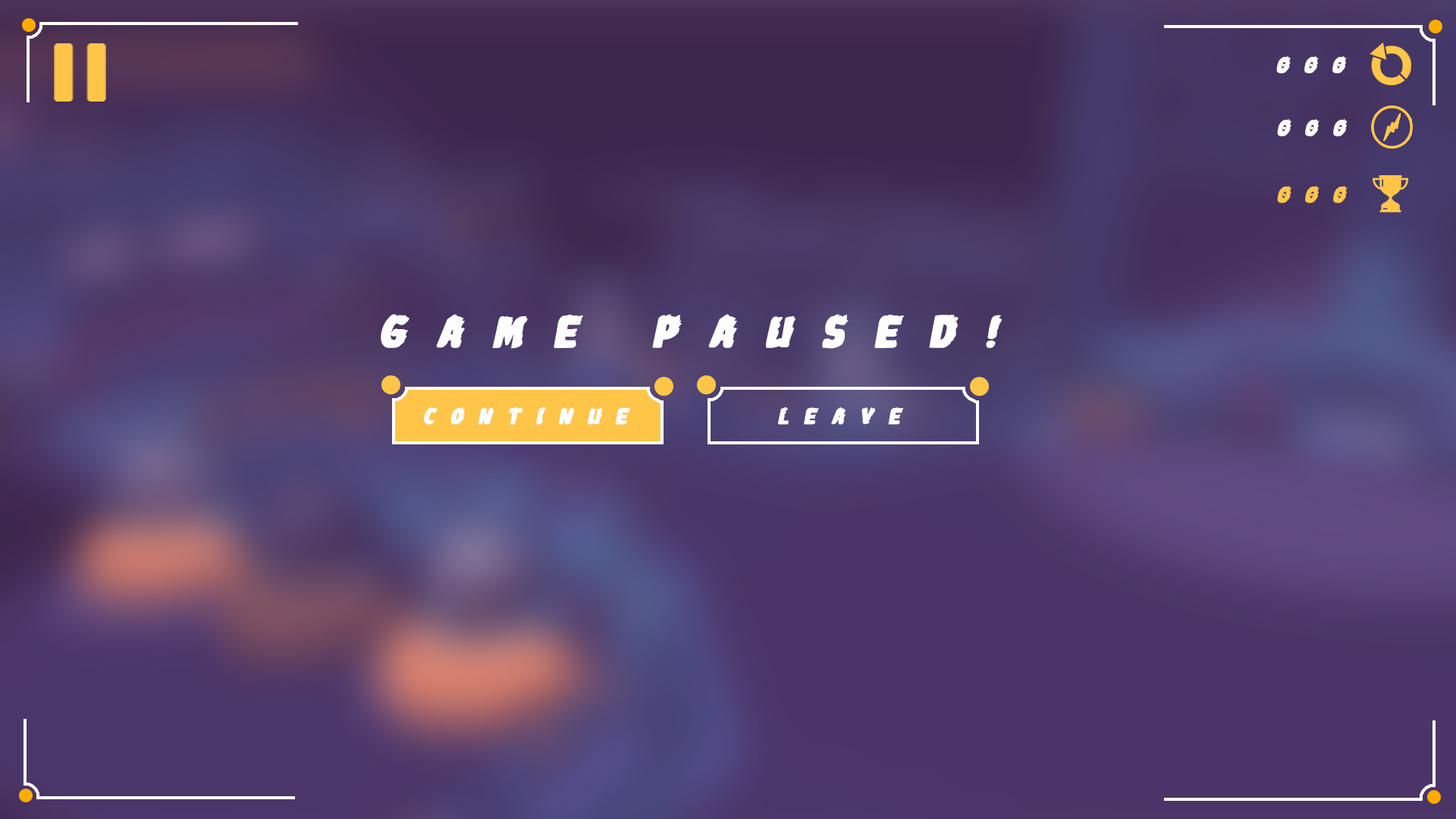
<style>
.page{position:relative;width:1456px;height:819px}
.page>*{position:absolute;margin:0}
.t1{font:22.7px "JohnnyTorch";letter-spacing:0.67em;color:#ffffff;font-weight:bold;font-style:italic}
.t2{font:22.7px "JohnnyTorch";letter-spacing:0.67em;color:#ffc549;font-weight:bold;font-style:italic}
.t3{font:45.5px "JohnnyTorch";letter-spacing:0.67em;color:#fdfdfe;font-weight:bold;font-style:italic}
.t4{font:22.7px "JohnnyTorch";letter-spacing:0.67em;color:#fdfdfe;font-weight:bold;font-style:italic}
</style>
<div class="page">
<p class="t1" style="left:1276px;top:56px;width:71px;height:18px">000</p>
<p class="t1" style="left:1277px;top:119px;width:71px;height:17px">000</p>
<p class="t2" style="left:1277px;top:186px;width:71px;height:17px">000</p>
<p class="t3" style="left:381px;top:314px;width:621px;height:35px">game paused!</p>
<p class="t4" style="left:424px;top:407px;width:206px;height:18px">continue</p>
<p class="t4" style="left:778px;top:407px;width:125px;height:18px">leave</p>
</div>
